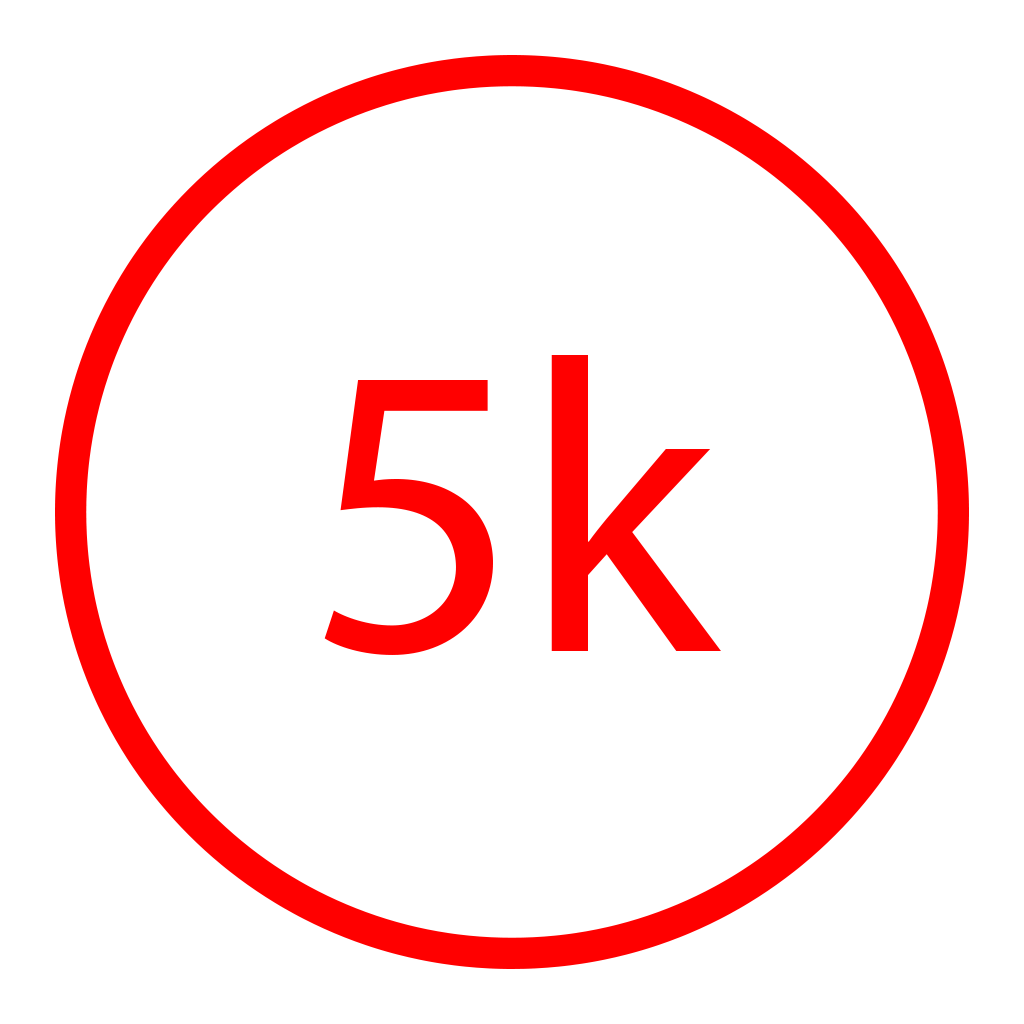
<style>
.page{position:relative;width:1024px;height:1024px;background:#ffffff}
.page>*{position:absolute;margin:0}
.t1{font:416.7px "MyriadPro-Regular";color:#ff0000}
</style>
<div class="page">
<p class="t1" style="left:324px;top:355px;width:397px;height:300px">5k</p>
</div>
